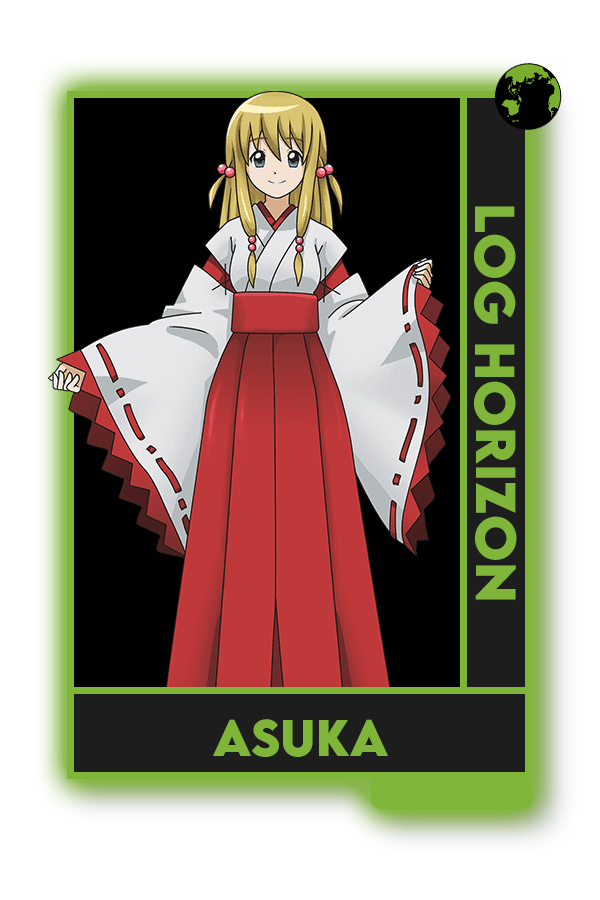
<style>
.page{position:relative;width:600px;height:900px;background:#ffffff}
.page>*{position:absolute;margin:0}
.t1{font:50px "LEMONMILK-Bold";color:#7fad41}
.t2{font:45.8px "LEMONMILK-Bold";color:#7fad41}
</style>
<div class="page">
<p class="t1" style="left:474px;top:206px;width:43px;height:394px;rotate:90deg">Log Horizon</p>
<p class="t2" style="left:213px;top:719px;width:175px;height:38px">Asuka</p>
</div>
